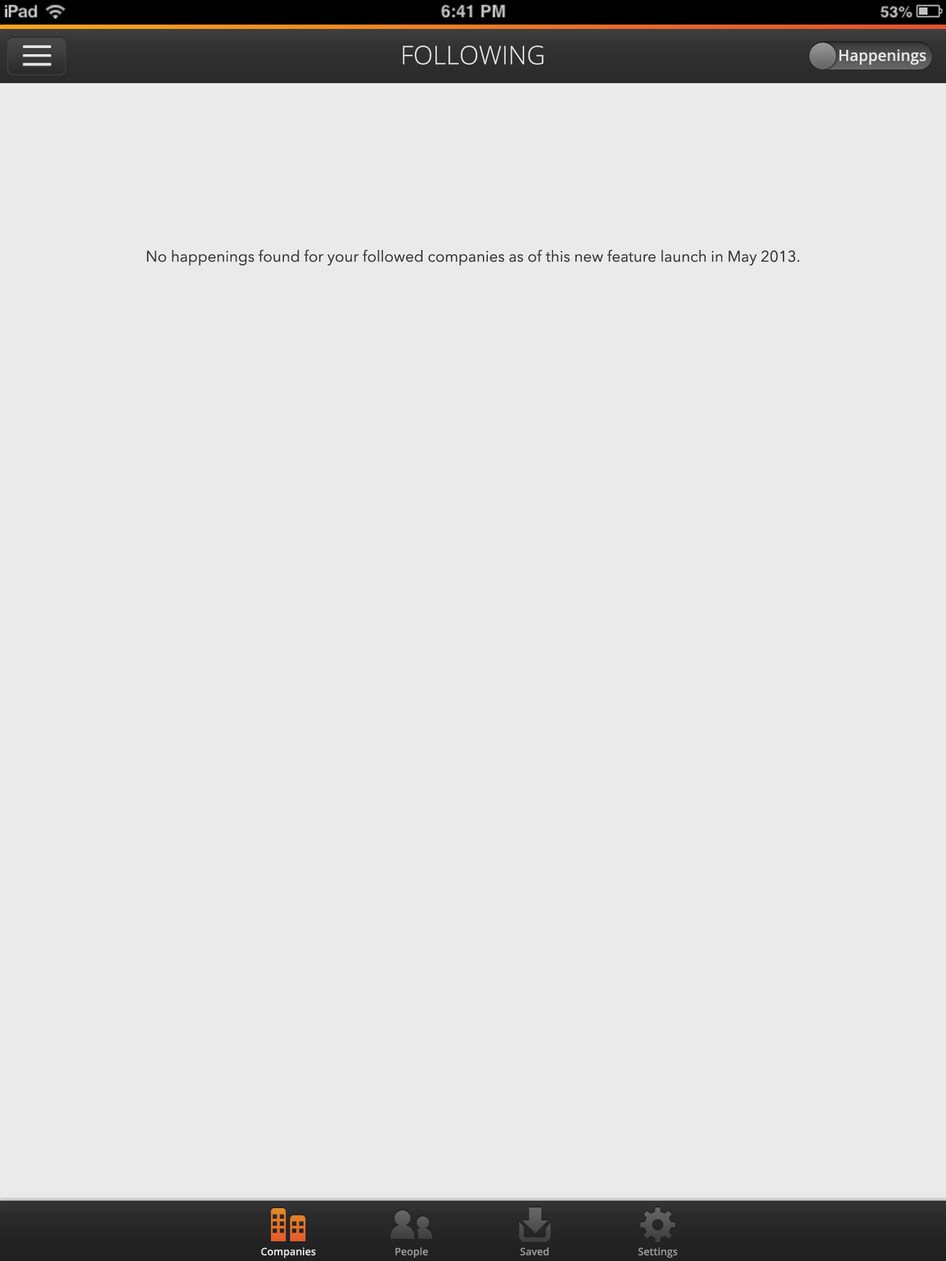
<style>
.page{position:relative;width:946px;height:1261px;background:#eaeaea}
.page>*{position:absolute;margin:0}
.t1{font:25.7px "OpenSans-Light";color:#e5e5e5}
.t2{font:15.4px "OpenSans-Semibold";color:#e5e5e5}
.t3{font:15.4px "AvenirNext-Regular";color:#343434}
.t4{font:10.3px "OpenSans-Semibold";color:#e5e5e5}
.t5{font:10.3px "OpenSans-Semibold";color:#969696}
</style>
<div class="page">
<p class="t1" style="left:403px;top:46px;width:141px;height:19px">FOLLOWING</p>
<p class="t2" style="left:839px;top:49px;width:87px;height:16px">Happenings</p>
<p class="t3" style="left:147px;top:249px;width:652px;height:16px">No happenings found for your followed companies as of this new feature launch in May 2013.</p>
<p class="t4" style="left:261px;top:1247px;width:55px;height:11px">Companies</p>
<p class="t5" style="left:395px;top:1247px;width:33px;height:11px">People</p>
<p class="t5" style="left:520px;top:1247px;width:29px;height:8px">Saved</p>
<p class="t5" style="left:638px;top:1247px;width:39px;height:11px">Settings</p>
</div>
